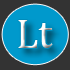
<style>
.page{position:relative;width:70px;height:70px;background:#333333}
.page>*{position:absolute;margin:0}
.t1{font:42px "Cambria";color:#f7f8f8}
</style>
<div class="page">
<p class="t1" style="left:18px;top:20px;width:35px;height:28px">Lt</p>
</div>
